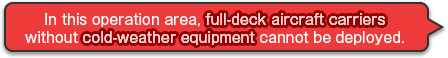
<style>
.page{position:relative;width:448px;height:58px;background:#ed3b3b}
.page>*{position:absolute;margin:0}
.t1{font:14px/18px "GothicMB101Pro-Regular";color:#ffd3d3}
.t2{font:14px/18px "GothicMB101Pro-Regular";color:#ffffff}
</style>
<div class="page">
<p class="t1" style="left:25px;top:13px;width:379px;height:32px;text-align:center"><span class="t2">In this operation area, </span>full-deck aircraft carriers<br><span class="t2">without </span>cold-weather equipment<span class="t2"> cannot be deployed.</span></p>
<p class="t1" style="left:25px;top:13px;width:379px;height:32px;text-align:center"><span class="t2">In this operation area, </span>full-deck aircraft carriers<br><span class="t2">without </span>cold-weather equipment<span class="t2"> cannot be deployed.</span></p>
</div>
